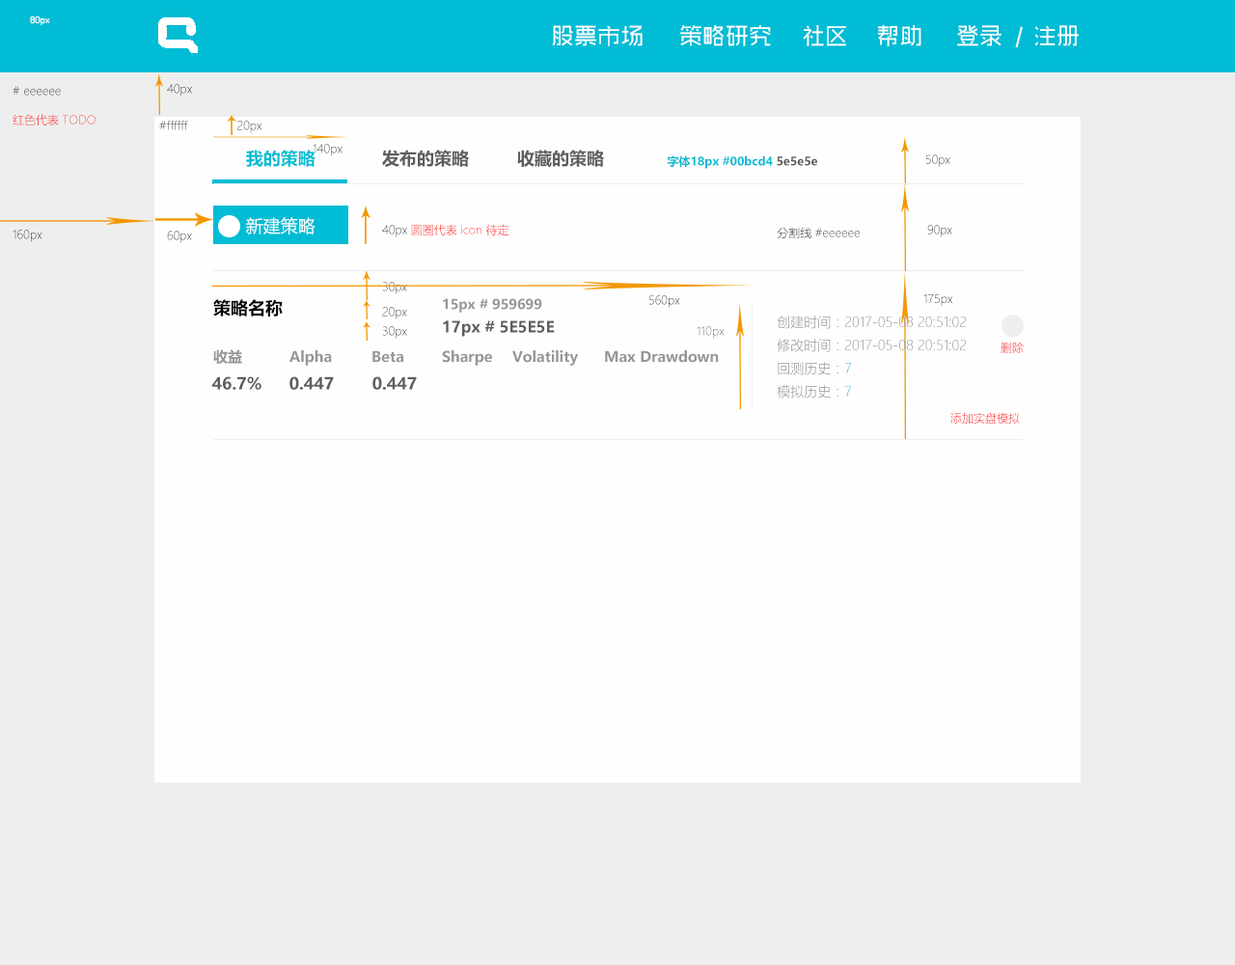
<style>
.page{position:relative;width:1235px;height:965px;background:#fefefe}
.page>*{position:absolute;margin:0}
.t1{font:11.6px "MicrosoftYaHeiLight"}
.t2{font:17.4px "MicrosoftYaHei-Bold";color:#00bcd4}
.t3{font:17.4px "MicrosoftYaHei-Bold";color:#5e5e5e}
.t4{font:11.6px "MicrosoftYaHei-Bold";color:#00bcd4}
.t5{font:11.6px "MicrosoftYaHei-Bold";color:#04bcd4}
.t6{font:11.6px "MicrosoftYaHei-Bold";color:#5e5e5e}
.t7{font:17.4px "MicrosoftYaHei";color:#ffffff}
.t8{font:11.6px "MicrosoftYaHeiLight";color:#ff0000}
.t9{font:17.4px "MicrosoftYaHei-Bold";color:#000000}
.t10{font:13.5px "MicrosoftYaHei-Bold";color:#959699}
.t11{font:13.5px "MicrosoftYaHeiLight";color:#959699}
.t12{font:15.4px "MicrosoftYaHei-Bold";color:#5e5e5e}
.t13{font:14.5px "MicrosoftYaHei-Bold";color:#959699}
.t14{font:13.5px "MicrosoftYaHeiLight";color:#00bcd4}
.t15{font:16.4px "MicrosoftYaHei-Bold";color:#5e5e5e}
</style>
<div class="page">
<p class="t1" style="left:13px;top:86px;width:48px;height:10px"># eeeeee</p>
<p class="t1" style="left:167px;top:84px;width:25px;height:13px">40px</p>
<p class="t1" style="left:13px;top:114px;width:83px;height:11px">红色代表 TODO</p>
<p class="t1" style="left:159px;top:121px;width:29px;height:9px">#ffffff</p>
<p class="t1" style="left:237px;top:121px;width:26px;height:12px">20px</p>
<p class="t2" style="left:246px;top:150px;width:70px;height:17px">我的策略</p>
<p class="t1" style="left:313px;top:144px;width:30px;height:12px">140px</p>
<p class="t3" style="left:382px;top:150px;width:87px;height:17px">发布的策略</p>
<p class="t3" style="left:517px;top:150px;width:87px;height:17px">收藏的策略</p>
<p class="t4" style="left:667px;top:155px;width:151px;height:14px"><span class="t5">字体18px</span> #00bcd4 <span class="t6">5e5e5e</span></p>
<p class="t1" style="left:927px;top:154px;width:24px;height:13px">50px</p>
<p class="t7" style="left:246px;top:217px;width:70px;height:18px">新建策略</p>
<p class="t1" style="left:13px;top:230px;width:29px;height:12px">160px</p>
<p class="t1" style="left:167px;top:231px;width:25px;height:12px">60px</p>
<p class="t8" style="left:382px;top:224px;width:127px;height:13px">40px 圆圈代表 icon 待定</p>
<p class="t1" style="left:777px;top:227px;width:83px;height:11px">分割线 #eeeeee</p>
<p class="t1" style="left:928px;top:225px;width:25px;height:12px">90px</p>
<p class="t1" style="left:382px;top:282px;width:25px;height:12px">30px</p>
<p class="t1" style="left:924px;top:293px;width:30px;height:13px">175px</p>
<p class="t9" style="left:213px;top:299px;width:70px;height:18px">策略名称</p>
<p class="t10" style="left:443px;top:298px;width:99px;height:15px">15px # 959699</p>
<p class="t1" style="left:650px;top:295px;width:30px;height:13px">560px</p>
<p class="t1" style="left:382px;top:307px;width:25px;height:12px">20px</p>
<p class="t11" style="left:777px;top:316px;width:189px;height:13px">创建时间：2017-05-08 20:51:02</p>
<p class="t1" style="left:382px;top:326px;width:25px;height:13px">30px</p>
<p class="t12" style="left:443px;top:320px;width:112px;height:17px">17px # 5E5E5E</p>
<p class="t1" style="left:697px;top:326px;width:28px;height:13px">110px</p>
<p class="t11" style="left:777px;top:339px;width:189px;height:13px">修改时间：2017-05-08 20:51:02</p>
<p class="t1" style="left:1001px;top:342px;width:23px;height:11px">删除</p>
<p class="t13" style="left:213px;top:349px;width:29px;height:15px">收益</p>
<p class="t13" style="left:290px;top:350px;width:42px;height:16px">Alpha</p>
<p class="t13" style="left:373px;top:350px;width:30px;height:13px">Beta</p>
<p class="t13" style="left:442px;top:350px;width:50px;height:16px">Sharpe</p>
<p class="t13" style="left:513px;top:350px;width:65px;height:16px">Volatility</p>
<p class="t13" style="left:605px;top:350px;width:114px;height:13px">Max Drawdown</p>
<p class="t11" style="left:778px;top:362px;width:74px;height:13px">回测历史：<span class="t14">7</span></p>
<p class="t15" style="left:211px;top:376px;width:51px;height:14px">46.7%</p>
<p class="t15" style="left:290px;top:376px;width:44px;height:14px">0.447</p>
<p class="t15" style="left:373px;top:376px;width:44px;height:14px">0.447</p>
<p class="t11" style="left:777px;top:385px;width:75px;height:14px">模拟历史：<span class="t14">7</span></p>
<p class="t1" style="left:951px;top:412px;width:69px;height:12px">添加实盘模拟</p>
</div>
